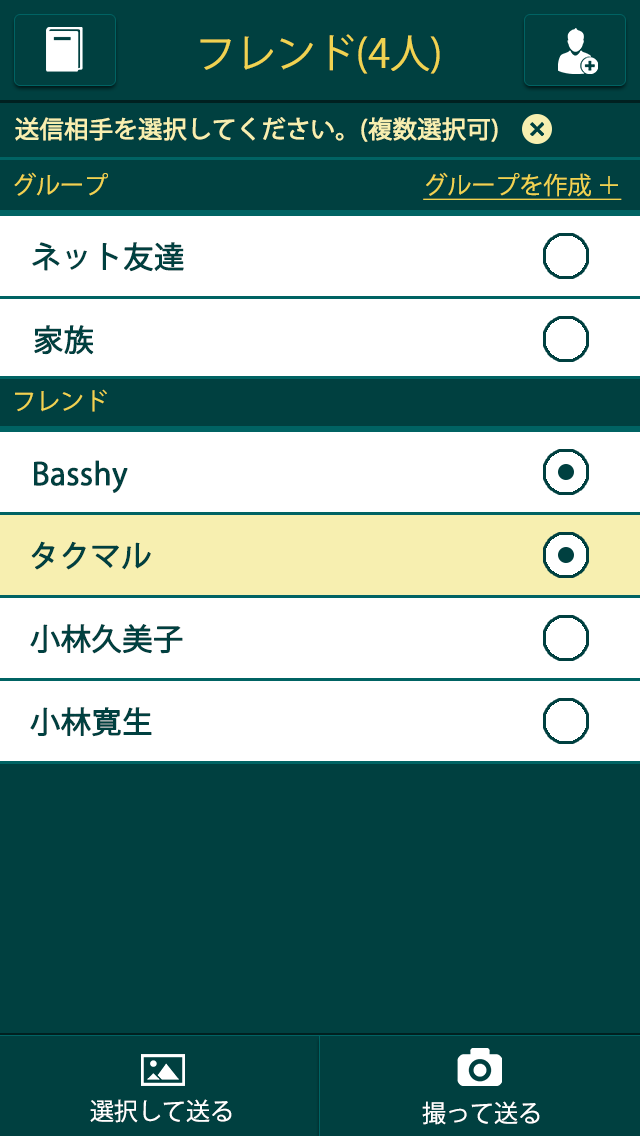
<style>
.page{position:relative;width:640px;height:1136px;background:#004040}
.page>*{position:absolute;margin:0}
.t1{font:40px "KozGoPr6N-Regular";color:#f0d351}
.t2{font:24px "KozGoPr6N-Regular";color:#f7efb0;font-weight:bold}
.t3{font:24px "KozGoPr6N-Regular";color:#f0d351}
.t4{font:24px "KozGoPr6N-Regular";color:#f0d351;text-decoration:underline}
.t5{font:30px "KozGoPr6N-Regular";color:#004040;font-weight:bold}
.t6{font:24px "KozGoPr6N-Regular";color:#ffffff}
</style>
<div class="page">
<p class="t1" style="left:200px;top:34px;width:240px;height:40px">フレンド(4人)</p>
<p class="t2" style="left:15px;top:117px;width:483px;height:25px">送信相手を選択してください。(複数選択可)</p>
<p class="t3" style="left:14px;top:172px;width:94px;height:24px">グループ</p>
<p class="t4" style="left:423px;top:172px;width:199px;height:28px">グループを作成 ＋</p>
<p class="t5" style="left:32px;top:242px;width:152px;height:30px">ネット友達</p>
<p class="t5" style="left:34px;top:325px;width:60px;height:30px">家族</p>
<p class="t3" style="left:15px;top:389px;width:92px;height:23px">フレンド</p>
<p class="t5" style="left:34px;top:460px;width:94px;height:33px">Basshy</p>
<p class="t5" style="left:31px;top:541px;width:120px;height:29px">タクマル</p>
<p class="t5" style="left:30px;top:624px;width:153px;height:30px">小林久美子</p>
<p class="t5" style="left:30px;top:707px;width:122px;height:30px">小林寛生</p>
<p class="t6" style="left:90px;top:1099px;width:142px;height:24px">選択して送る</p>
<p class="t6" style="left:422px;top:1101px;width:118px;height:24px">撮って送る</p>
</div>
